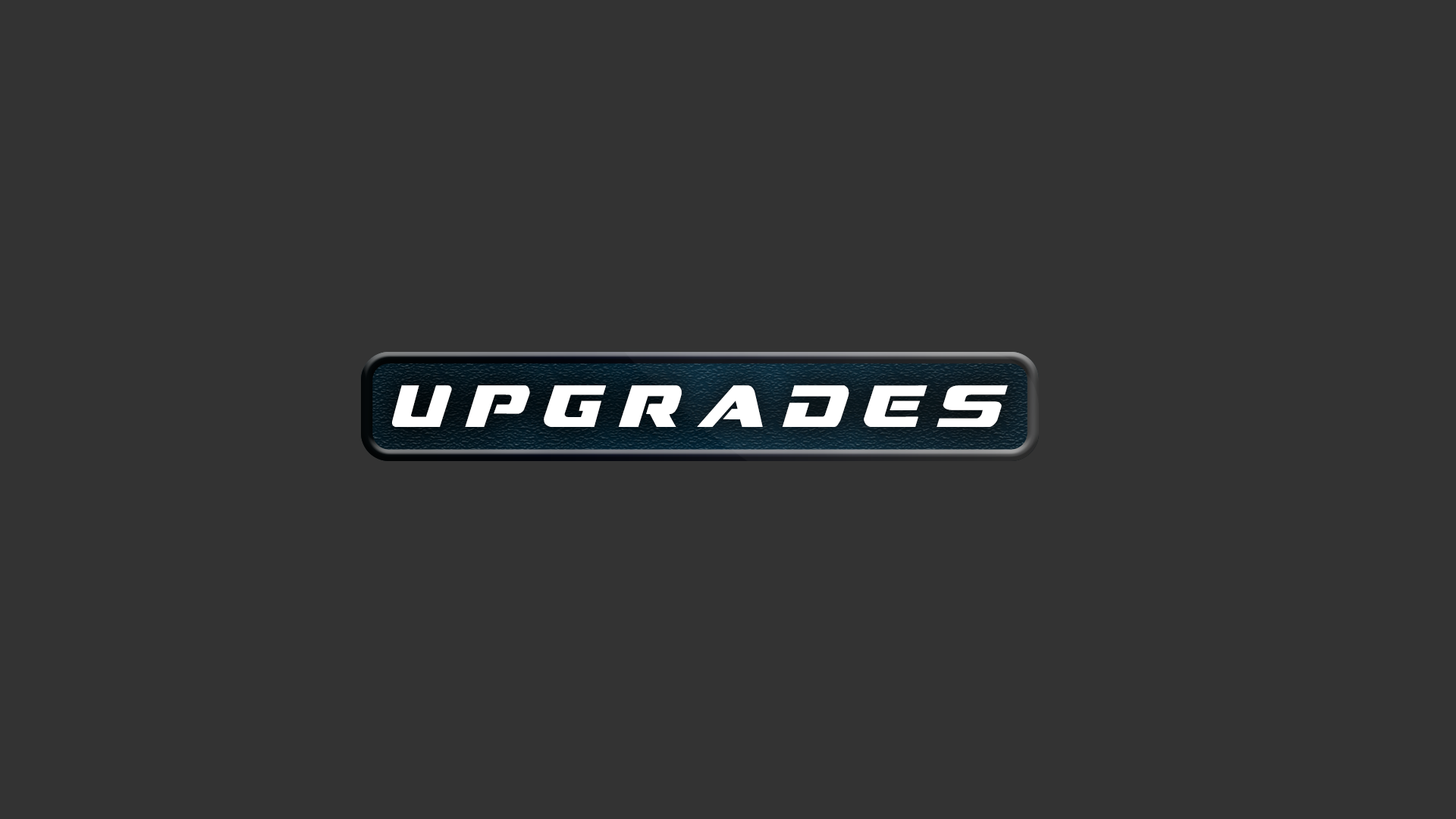
<style>
.page{position:relative;width:1456px;height:819px;background:#333333}
.page>*{position:absolute;margin:0}
.t1{font:59.1px "DreamMMA";letter-spacing:0.34em;color:#ffffff}
</style>
<div class="page">
<p class="t1" style="left:392px;top:385px;width:616px;height:42px">upgrades</p>
</div>
